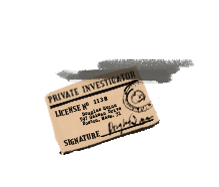
<style>
.page{position:relative;width:219px;height:187px;background:#ffffff}
.page>*{position:absolute;margin:0}
.t1{font:8px "CreditValley-Bold";letter-spacing:0.01em;color:#0a0907}
.t2{font:6px "CreditValley-Bold";letter-spacing:0.21em;color:#0a0907}
.t3{font:4.5px/4.5px "HOLLYWOOD-STARFIRE";color:#0a0907}
</style>
<div class="page">
<p class="t1" style="left:54px;top:102px;width:35px;height:15px;rotate:-16deg">LICENSE NO</p>
<p class="t2" style="left:93px;top:96px;width:15px;height:9px;rotate:-16deg">1138</p>
<p class="t3" style="left:79px;top:104px;width:43px;height:22px;text-align:center;rotate:-16deg">Douglas Quinn<br>597 Gaiman Drive<br>Boston, Mass. 31</p>
<p class="t1" style="left:63px;top:130px;width:37px;height:16px;rotate:-16deg">SIGNATURE</p>
</div>
